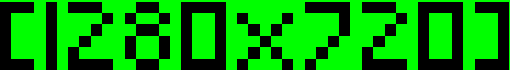
<style>
.page{position:relative;width:510px;height:70px;background:#00ff00}
.page>*{position:absolute;margin:0}
.t1{font:57px "Pixeled";color:#000000}
</style>
<div class="page">
<p class="t1" style="left:0px;top:2px;width:509px;height:68px">[1280x720]</p>
</div>
